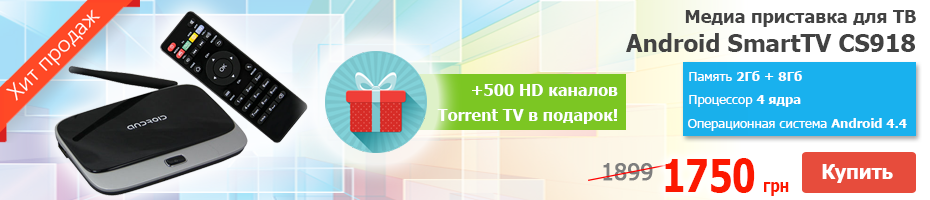
<style>
.page{position:relative;width:930px;height:200px}
.page>*{position:absolute;margin:0}
.t1{font:18px "Tahoma-Bold";color:#424242}
.t2{font:24px "Tahoma-Bold";color:#424242}
.t3{font:13px "Tahoma-Bold";color:#ffffff}
.t4{font:13px "Tahoma";color:#ffffff}
.t5{font:16px "Tahoma-Bold";color:#ffffff}
.t6{font:46px "Tahoma-Bold";color:#fc1800;scale:0.8 1}
.t7{font:18.3px "Tahoma-Bold";color:#fc1800;scale:0.8 1}
.t8{font:22.7px "Tahoma";color:#7e7e7e;font-weight:bold}
.t9{font:19.7px "Tahoma-Bold";color:#ffffff}
</style>
<div class="page">
<p class="t1" style="left:685px;top:10px;width:231px;height:17px">Медиа приставка для ТВ</p>
<p class="t2" style="left:626px;top:33px;width:289px;height:19px">Android SmartTV CS918</p>
<p class="t3" style="left:689px;top:71px;width:113px;height:10px"><span class="t4">Память </span>2Гб + 8Гб</p>
<p class="t5" style="left:472px;top:84px;width:146px;height:12px">+500 HD каналов</p>
<p class="t4" style="left:689px;top:95px;width:112px;height:12px">Процессор <span class="t3">4 ядра</span></p>
<p class="t5" style="left:437px;top:109px;width:180px;height:15px">Torrent TV в подарок!</p>
<p class="t4" style="left:688px;top:118px;width:219px;height:13px">Операционная система <span class="t3">Android 4.4</span></p>
<p class="t6" style="left:665px;top:158px;width:124px;height:38px">1750 <span class="t7">грн</span></p>
<p class="t8" style="left:603px;top:163px;width:50px;height:18px">1899</p>
<p class="t9" style="left:822px;top:164px;width:71px;height:19px">Купить</p>
</div>
